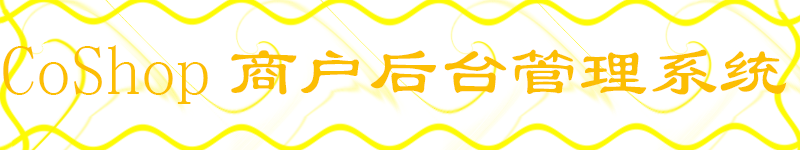
<style>
.page{position:relative;width:800px;height:150px;background:#ffffff}
.page>*{position:absolute;margin:0}
.t1{font:70px "LiSu";color:#fcbe03}
</style>
<div class="page">
<p class="t1" style="left:3px;top:45px;width:784px;height:59px">CoShop商户后台管理系统</p>
</div>
